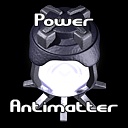
<style>
.page{position:relative;width:128px;height:128px;background:#000000}
.page>*{position:absolute;margin:0}
.t1{font:18px "GravitateBRK";color:#ffffff}
</style>
<div class="page">
<p class="t1" style="left:34px;top:13px;width:60px;height:13px">Power</p>
<p class="t1" style="left:10px;top:99px;width:108px;height:13px">Antimatter</p>
</div>
